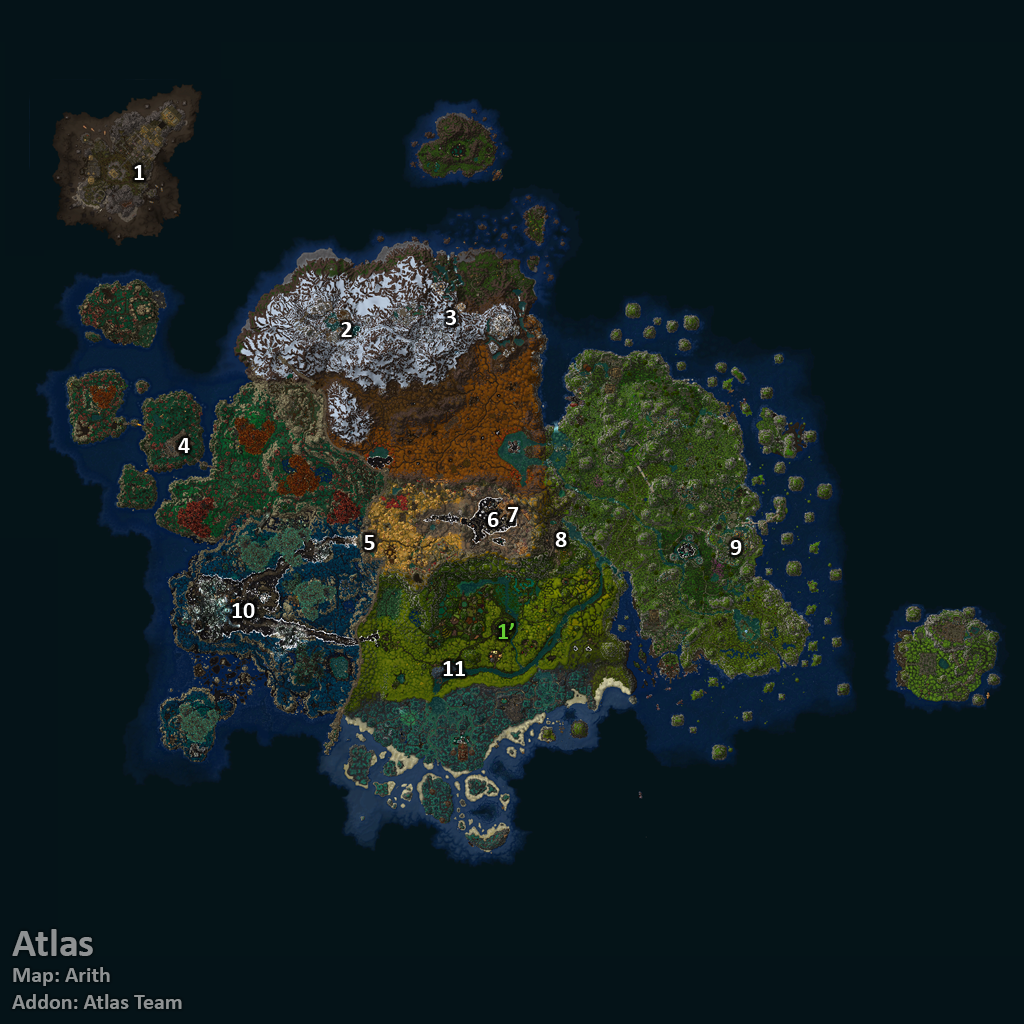
<style>
.page{position:relative;width:1024px;height:1024px;background:#051418}
.page>*{position:absolute;margin:0}
.t1{font:24px "Calibri-Bold";color:#ffffff}
.t2{font:24px "Calibri-Bold";color:#66cc33}
.t3{font:22px "Calibri-Bold";color:#8e9192}
.t4{font:40px "Calibri-Bold";color:#8e9192}
</style>
<div class="page">
<p class="t1" style="left:134px;top:165px;width:10px;height:15px">1</p>
<p class="t1" style="left:446px;top:310px;width:10px;height:15px">3</p>
<p class="t1" style="left:341px;top:322px;width:11px;height:15px">2</p>
<p class="t1" style="left:178px;top:438px;width:12px;height:15px">4</p>
<p class="t1" style="left:508px;top:507px;width:11px;height:15px">7</p>
<p class="t1" style="left:488px;top:512px;width:11px;height:15px">6</p>
<p class="t1" style="left:555px;top:532px;width:12px;height:15px">8</p>
<p class="t1" style="left:364px;top:535px;width:11px;height:15px">5</p>
<p class="t1" style="left:730px;top:540px;width:12px;height:15px">9</p>
<p class="t1" style="left:232px;top:603px;width:23px;height:15px">10</p>
<p class="t2" style="left:498px;top:623px;width:16px;height:16px">1’</p>
<p class="t1" style="left:443px;top:661px;width:22px;height:15px">11</p>
<p class="t3" style="left:12px;top:929px;width:170px;height:80px"><span class="t4">Atlas<br></span>Map: Arith<br>Addon: Atlas Team</p>
</div>
